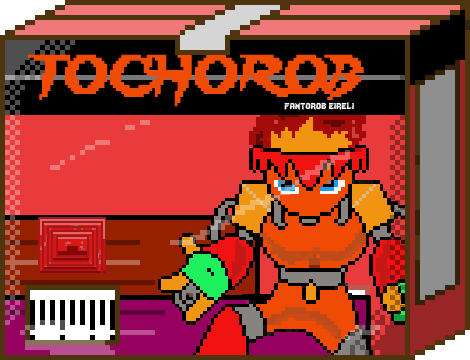
<style>
.page{position:relative;width:470px;height:360px}
.page>*{position:absolute;margin:0}
.t1{font:48.3px "Lady-Radical";color:#f04b04;scale:0.93 1}
.t2{font:12px "Lady-Radical";color:#fbfbfb}
</style>
<div class="page">
<p class="t1" style="left:28px;top:54px;width:336px;height:53px">TOCHOROB</p>
<p class="t2" style="left:284px;top:102px;width:70px;height:8px">fantorob eireli</p>
</div>
